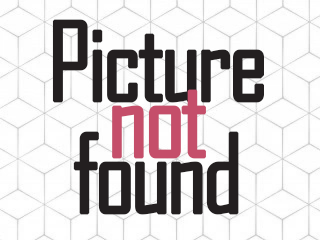
<style>
.page{position:relative;width:320px;height:240px;background:#fefefe}
.page>*{position:absolute;margin:0}
.t1{font:105px/56px "AgencyFB-Reg";letter-spacing:-0.06em;color:#231f20;font-weight:bold}
.t2{font:105px/56px "AgencyFB-Reg";letter-spacing:-0.06em;color:#c54e6a;font-weight:bold}
</style>
<div class="page">
<p class="t1" style="left:52px;top:19px;width:212px;height:196px;text-align:center">Picture<br><span class="t2">not<br></span>found</p>
</div>
